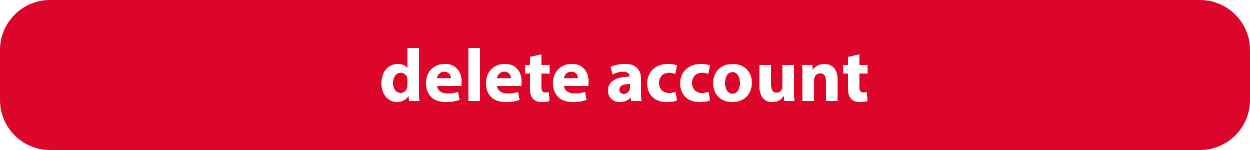
<style>
.page{position:relative;width:1250px;height:150px;background:#db0629}
.page>*{position:absolute;margin:0}
.t1{font:75px "MyriadPro-Bold";color:#ffffff}
</style>
<div class="page">
<p class="t1" style="left:381px;top:48px;width:487px;height:54px">delete account</p>
</div>
